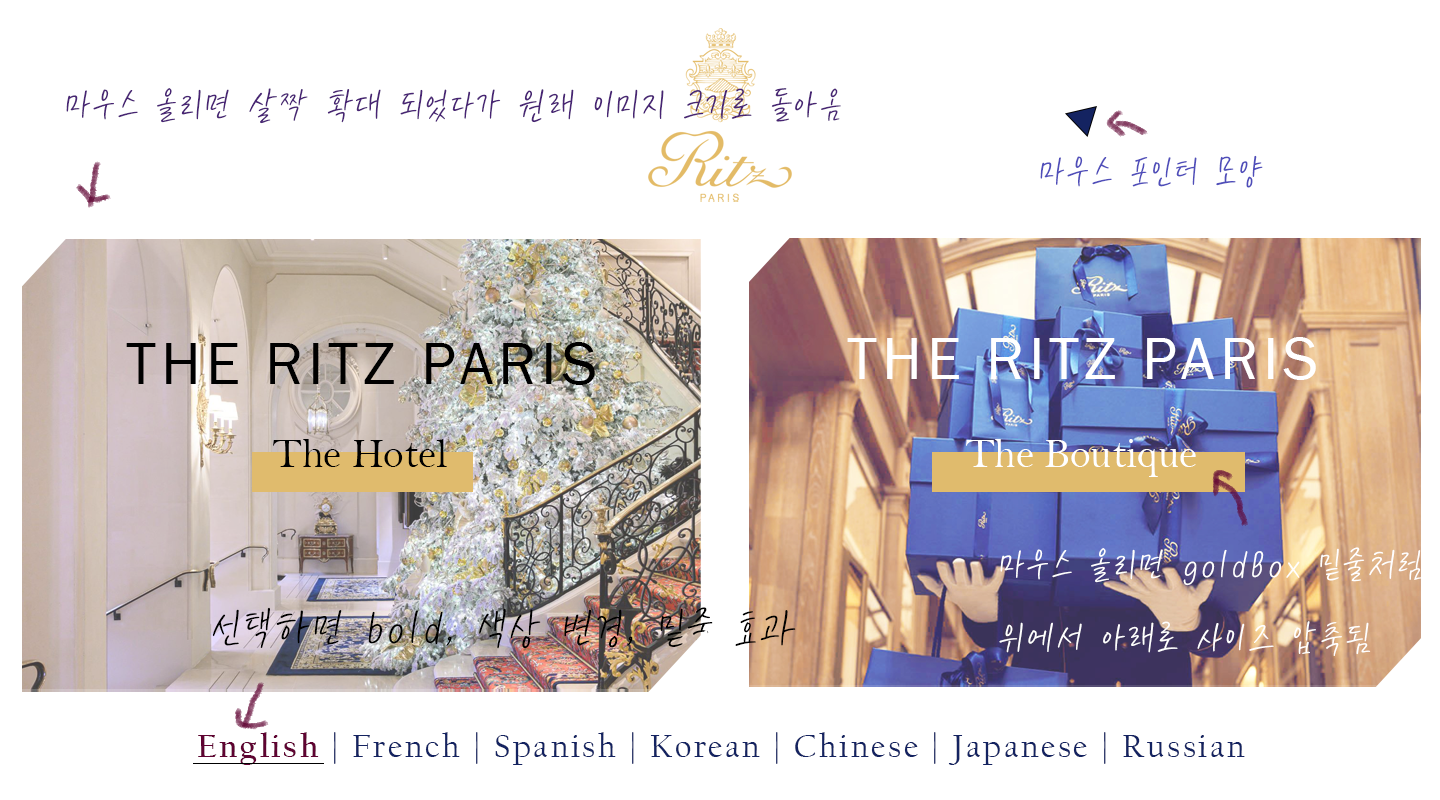
<style>
.page{position:relative;width:1440px;height:800px;background:#ffffff}
.page>*{position:absolute;margin:0}
.t1{font:41.7px "KCC-eunyoung-Regular";letter-spacing:0.075em;color:#482474}
.t2{font:41.7px "KCC-eunyoung-Regular";letter-spacing:0.075em;color:#4f4dba}
.t3{font:62.5px "FranklinGothic-Book";letter-spacing:0.075em;color:#000000}
.t4{font:62.5px "FranklinGothic-Book";letter-spacing:0.075em;color:#ffffff}
.t5{font:41.7px "BellMT";color:#000000}
.t6{font:41.7px "BellMT";color:#ffffff}
.t7{font:41.7px "KCC-eunyoung-Regular";letter-spacing:0.075em;color:#ffffff}
.t8{font:50px "KCC-eunyoung-Regular";letter-spacing:0.075em;color:#000000}
.t9{font:33.3px "CalifornianFB-Reg";letter-spacing:0.075em;color:#142361}
.t10{font:33.3px "CalifornianFB-Bold";letter-spacing:0.075em;color:#5f0332}
</style>
<div class="page">
<p class="t1" style="left:66px;top:88px;width:775px;height:36px">마우스 올리면 살짝 확대 되었다가 원래 이미지 크기로 돌아옴</p>
<p class="t2" style="left:1040px;top:155px;width:223px;height:33px">마우스 포인터 모양</p>
<p class="t3" style="left:126px;top:342px;width:469px;height:43px">THE RITZ PARIS</p>
<p class="t4" style="left:847px;top:337px;width:469px;height:43px">THE RITZ PARIS</p>
<p class="t5" style="left:273px;top:439px;width:174px;height:28px">The Hotel</p>
<p class="t6" style="left:966px;top:439px;width:230px;height:38px">The Boutique</p>
<p class="t7" style="left:999px;top:547px;width:423px;height:109px">마우스 올리면 goldBox 밑줄처럼<br>위에서 아래로 사이즈 압축됨</p>
<p class="t8" style="left:212px;top:607px;width:584px;height:42px">선택하면 bold, 색상 변경, 밑줄 효과</p>
<p class="t9" style="left:198px;top:732px;width:1047px;height:33px"><span class="t10">English</span> | French | Spanish | Korean | Chinese | Japanese | Russian</p>
</div>
